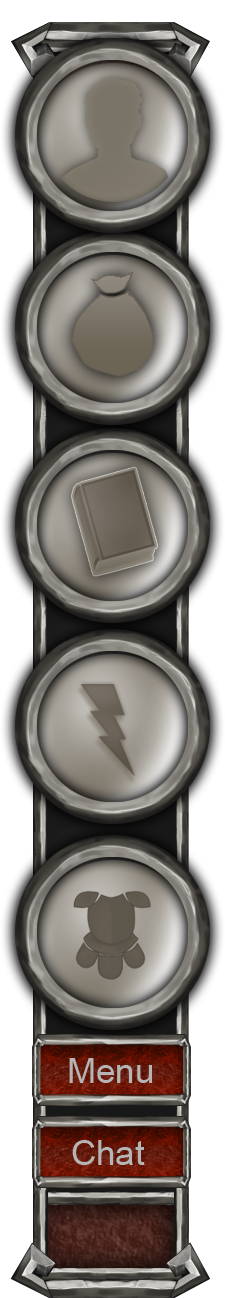
<style>
.page{position:relative;width:225px;height:1298px}
.page>*{position:absolute;margin:0}
.t1{font:35px "ArialMT";color:#b5b5b5}
</style>
<div class="page">
<p class="t1" style="left:69px;top:1058px;width:83px;height:25px">Menu</p>
<p class="t1" style="left:72px;top:1140px;width:73px;height:25px">Chat</p>
</div>
